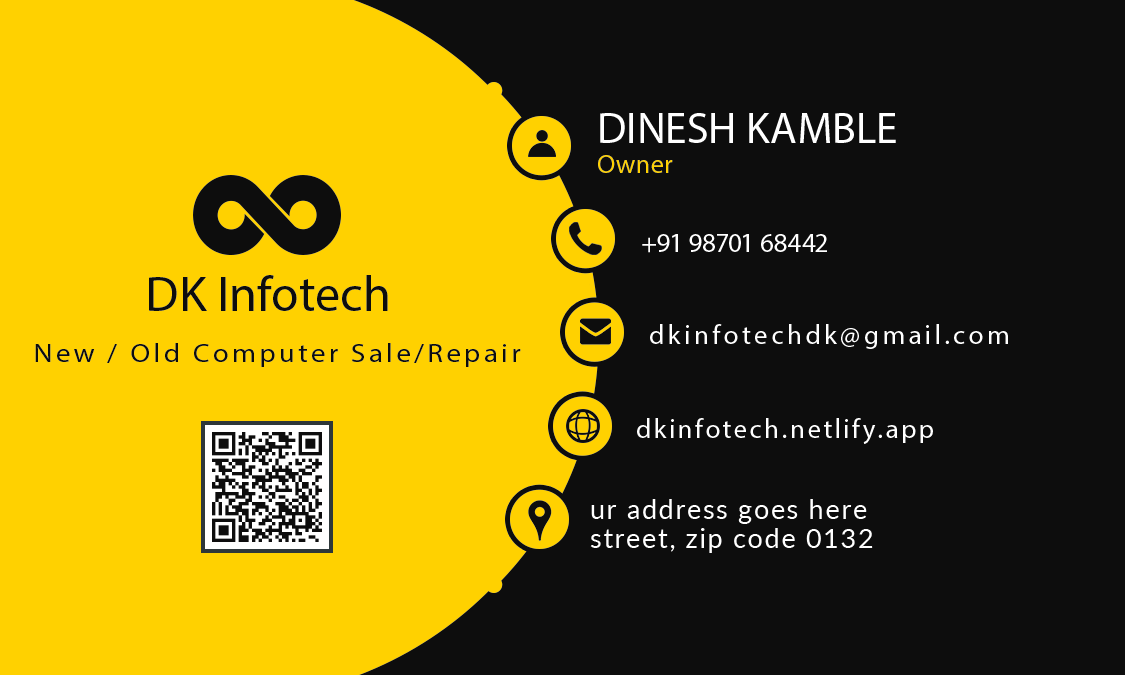
<style>
.page{position:relative;width:1125px;height:675px;background:#0d0d0d}
.page>*{position:absolute;margin:0}
.t1{font:43.7px "MyriadPro-Regular";color:#ffffff;text-transform:uppercase}
.t2{font:26.8px "MyriadPro-Regular";color:#ffd100}
.t3{font:27.1px "MyriadPro-Regular";color:#ffffff}
.t4{font:50px "MyriadPro-Regular";color:#0d0d0d}
.t5{font:27.1px "MyriadPro-Regular";letter-spacing:0.14em;color:#ffffff}
.t6{font:26.3px "MyriadPro-Regular";letter-spacing:0.12em;color:#0d0d0d;scale:1.09 1}
.t7{font:27.1px "MyriadPro-Regular";letter-spacing:0.1em;color:#ffffff}
.t8{font:27.1px/29.2px "Lato-Regular";letter-spacing:0.06em;color:#ffffff}
</style>
<div class="page">
<p class="t1" style="left:600px;top:113px;width:296px;height:30px">Dinesh kamble</p>
<p class="t2" style="left:598px;top:155px;width:75px;height:18px">Owner</p>
<p class="t3" style="left:642px;top:234px;width:185px;height:19px">+91 98701 68442</p>
<p class="t4" style="left:149px;top:275px;width:239px;height:36px">DK Infotech</p>
<p class="t5" style="left:650px;top:324px;width:358px;height:25px">dkinfotechdk@gmail.com</p>
<p class="t6" style="left:35px;top:343px;width:486px;height:24px">New / Old Computer Sale/Repair</p>
<p class="t7" style="left:637px;top:418px;width:296px;height:26px">dkinfotech.netlify.app</p>
<p class="t8" style="left:590px;top:499px;width:283px;height:54px">ur address goes here<br>street, zip code 0132</p>
</div>
